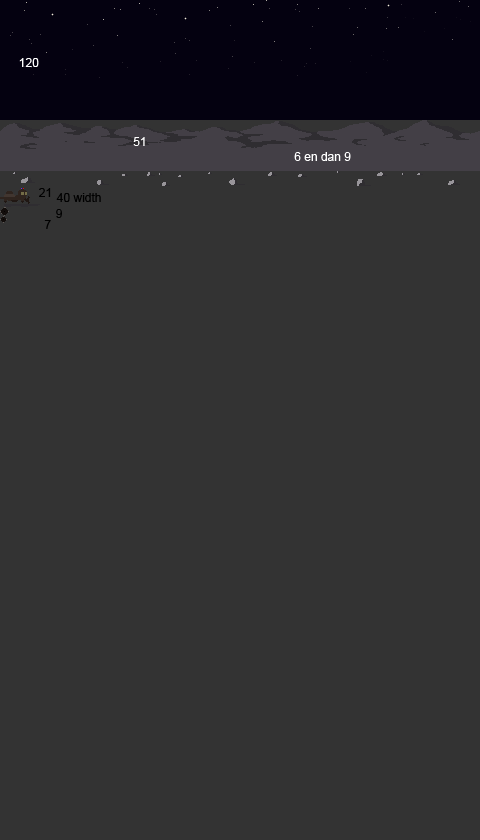
<style>
.page{position:relative;width:480px;height:840px;background:#333333}
.page>*{position:absolute;margin:0}
.t1{font:12px "ArialMT";color:#ffffff}
.t2{font:12px "ArialMT";color:#000000}
</style>
<div class="page">
<p class="t1" style="left:19px;top:58px;width:20px;height:9px">120</p>
<p class="t1" style="left:133px;top:137px;width:12px;height:9px">51</p>
<p class="t1" style="left:294px;top:152px;width:57px;height:9px">6 en dan 9</p>
<p class="t2" style="left:39px;top:188px;width:12px;height:9px">21</p>
<p class="t2" style="left:56px;top:193px;width:45px;height:9px">40 width</p>
<p class="t2" style="left:56px;top:209px;width:6px;height:9px">9</p>
<p class="t2" style="left:44px;top:220px;width:7px;height:9px">7</p>
</div>
